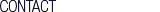
<style>
.page{position:relative;width:160px;height:12px;background:#ffffff}
.page>*{position:absolute;margin:0}
.t1{font:16.7px "HelveticaNeueLTPro-ThCn";color:#14102f}
</style>
<div class="page">
<p class="t1" style="left:0px;top:0px;width:56px;height:12px">CONTACT</p>
</div>
